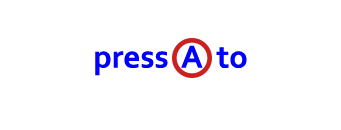
<style>
.page{position:relative;width:341px;height:130px;background:#ffffff}
.page>*{position:absolute;margin:0}
.t1{font:33.3px "Corbel-Bold";color:#0000ff}
</style>
<div class="page">
<p class="t1" style="left:95px;top:45px;width:152px;height:31px">press  A  to</p>
</div>
